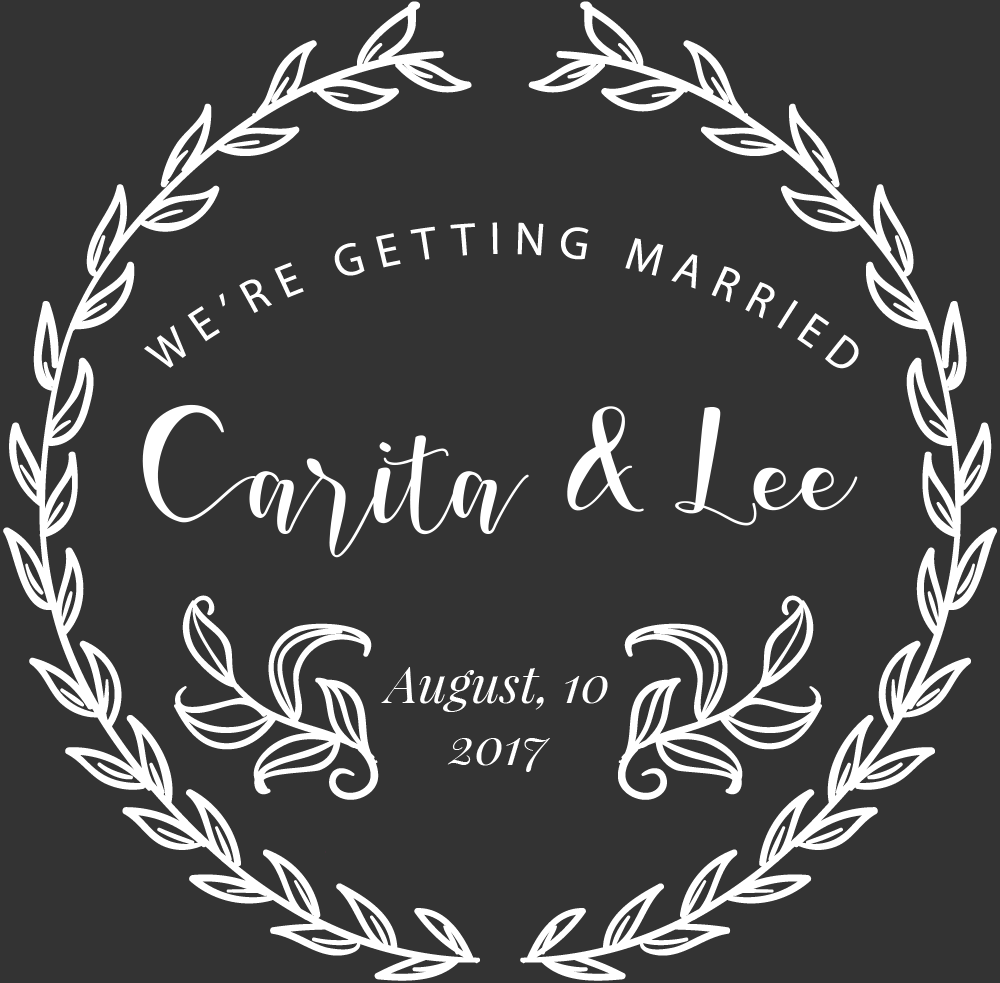
<style>
.page{position:relative;width:1000px;height:983px;background:#333333}
.page>*{position:absolute;margin:0}
.t1{font:165.8px "MarshaBelle";color:#ffffff}
.t2{font:51.7px "PlayfairDisplay-Italic";color:#ffffff}
</style>
<div class="page">
<p class="t1" style="left:142px;top:404px;width:716px;height:154px">Carita &amp; Lee</p>
<p class="t2" style="left:381px;top:667px;width:227px;height:105px;text-align:center">August, 10<br>2017</p>
</div>
